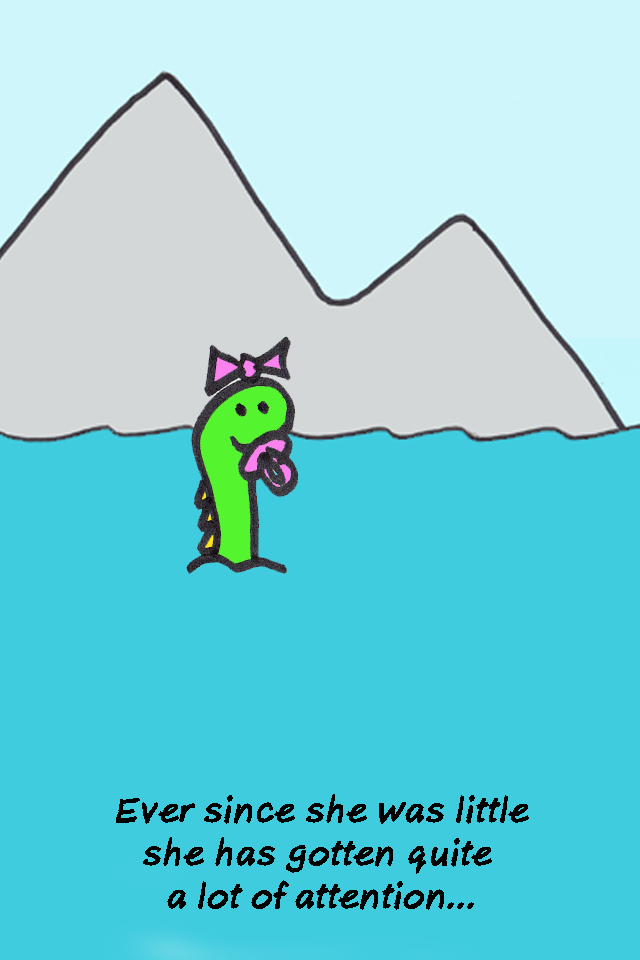
<style>
.page{position:relative;width:640px;height:960px;background:#40ccdf}
.page>*{position:absolute;margin:0}
.t1{font:36px "AxureHandwriting-BoldItalic";color:#000000}
</style>
<div class="page">
<p class="t1" style="left:116px;top:794px;width:413px;height:116px;text-align:center">Ever since she was little<br>she has gotten quite <br>a lot of attention...</p>
</div>
